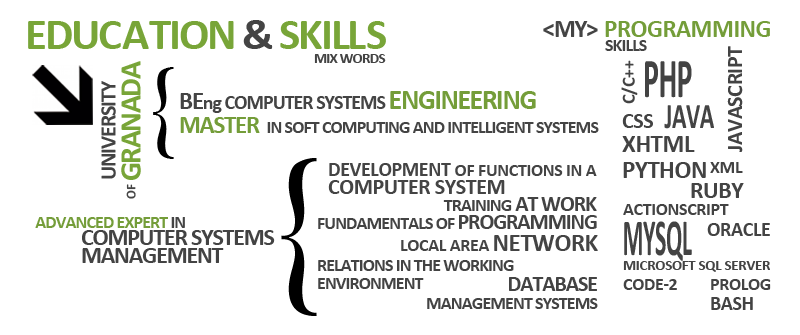
<style>
.page{position:relative;width:800px;height:335px;background:#ffffff}
.page>*{position:absolute;margin:0}
.t1{font:45px "Calibri-Bold";letter-spacing:-0.05em;color:#78a638}
.t2{font:45px "Calibri-Bold";color:#78a638}
.t3{font:45px "Calibri-Bold";letter-spacing:-0.05em;color:#444444}
.t4{font:25px "Calibri-Bold";letter-spacing:-0.02em;color:#749e39}
.t5{font:25px "Calibri-Bold";letter-spacing:-0.05em;color:#444444}
.t6{font:18px "Calibri-Bold";letter-spacing:-0.05em;color:#444444}
.t7{font:15px "Calibri-Bold";letter-spacing:-0.05em;color:#444444}
.t8{font:22px "Calibri-Bold";letter-spacing:-0.02em;color:#444444}
.t9{font:30px "Calibri-Bold";letter-spacing:-0.05em;color:#78a638}
.t10{font:18px "Calibri-Bold";color:#444444}
.t11{font:56.6px "Calibri-Bold";letter-spacing:-0.02em;color:#444444;scale:0.53 1}
.t12{font:100px "Elephant-Regular";letter-spacing:-0.02em;color:#000000;scale:0.61 1}
.t13{font:22px "Calibri-Bold";letter-spacing:-0.05em;color:#444444}
.t14{font:20px "Calibri-Bold";letter-spacing:-0.05em;color:#444444}
.t15{font:20px/24px "Calibri-Bold";letter-spacing:-0.05em;color:#444444}
.t16{font:28px/24px "Calibri-Bold";letter-spacing:-0.05em;color:#749e39}
.t17{font:25px/24px "Calibri-Bold";letter-spacing:-0.05em;color:#749e39}
.t18{font:18px/24px "Calibri-Bold";letter-spacing:-0.05em;color:#444444}
.t19{font:36.1px "Calibri-Bold";letter-spacing:-0.02em;color:#444444;scale:0.66 1}
.t20{font:25px "Calibri-Bold";letter-spacing:-0.02em;color:#444444}
.t21{font:170px "Elephant-Regular";letter-spacing:-0.02em;color:#000000;scale:0.61 1}
.t22{font:18px/18px "Calibri-Bold";letter-spacing:-0.02em;color:#444444}
.t23{font:20px/18px "Calibri-Bold";letter-spacing:-0.02em;color:#444444}
.t24{font:22px/18px "Calibri-Bold";letter-spacing:-0.02em;color:#444444}
.t25{font:18px "Calibri-Bold";letter-spacing:-0.02em;color:#444444}
.t26{font:13px "Calibri-Bold";letter-spacing:-0.05em;color:#444444}
.t27{font:24px "Calibri-Bold";letter-spacing:-0.02em;color:#444444}
.t28{font:18px "Calibri-Bold";letter-spacing:-0.05em;color:#749e39}
.t29{font:52.3px "Calibri-Bold";letter-spacing:-0.02em;color:#444444;scale:0.46 1}
.t30{font:24px/18px "Calibri-Bold";letter-spacing:-0.05em;color:#444444}
.t31{font:18px/18px "Calibri-Bold";letter-spacing:-0.05em;color:#444444}
.t32{font:20px "Calibri-Bold";letter-spacing:-0.02em;color:#444444}
.t33{font:15px "Calibri-Bold";letter-spacing:-0.02em;color:#444444}
.t34{font:22px/18px "Calibri-Bold";letter-spacing:-0.05em;color:#444444}
</style>
<div class="page">
<p class="t1" style="left:28px;top:20px;width:358px;height:29px">EDU<span class="t2">CA</span>TION <span class="t3">&amp;</span> SKIL<span class="t2">LS</span></p>
<p class="t4" style="left:543px;top:21px;width:227px;height:16px"><span class="t5">&lt;MY&gt; </span>PROGRAMMING</p>
<p class="t6" style="left:605px;top:40px;width:42px;height:11px">SKILLS</p>
<p class="t7" style="left:314px;top:54px;width:72px;height:9px">MIX WORDS</p>
<p class="t8" style="left:727px;top:46px;width:16px;height:106px;rotate:-90deg">JAVASCRIPT</p>
<p class="t9" style="left:121px;top:61px;width:20px;height:119px;rotate:-90deg">GRANADA</p>
<p class="t10" style="left:621px;top:60px;width:17px;height:44px;rotate:-90deg">C/C++</p>
<p class="t11" style="left:645px;top:61px;width:47px;height:37px">PHP</p>
<p class="t12" style="left:153px;top:67px;width:21px;height:92px">{</p>
<p class="t13" style="left:101px;top:81px;width:15px;height:98px;rotate:-90deg">UNIVERSITY</p>
<p class="t6" style="left:180px;top:91px;width:419px;height:42px"><span class="t5">BE</span><span class="t14">ng COMPUTER SYS</span><span class="t15">TEMS </span><span class="t16">ENGINEERING<br></span><span class="t17">MASTER  </span><span class="t18">IN SOFT COMPUTING </span>AND INTELLIGENT SYSTEMS</p>
<p class="t19" style="left:664px;top:105px;width:50px;height:24px">JAVA</p>
<p class="t8" style="left:622px;top:114px;width:31px;height:14px">CSS</p>
<p class="t20" style="left:622px;top:136px;width:73px;height:16px">XHTML</p>
<p class="t21" style="left:281px;top:158px;width:36px;height:158px">{</p>
<p class="t22" style="left:328px;top:163px;width:269px;height:31px"><span class="t23">DEVELOPMENT </span>OF FUNCTIONS IN A <br><span class="t24">COMPUTER SYSTEM</span></p>
<p class="t20" style="left:623px;top:162px;width:83px;height:16px">PYTHON</p>
<p class="t25" style="left:710px;top:162px;width:33px;height:11px">XML</p>
<p class="t26" style="left:126px;top:184px;width:10px;height:15px;rotate:-90deg">OF</p>
<p class="t27" style="left:691px;top:183px;width:53px;height:15px">RUBY</p>
<p class="t6" style="left:443px;top:197px;width:154px;height:14px">TRAINING <span class="t13">AT WORK</span></p>
<p class="t25" style="left:623px;top:204px;width:106px;height:11px">ACTIONSCRIPT</p>
<p class="t28" style="left:35px;top:217px;width:150px;height:11px">ADVANCED EXPERT<span class="t6"> IN</span></p>
<p class="t6" style="left:318px;top:215px;width:279px;height:14px">FUNDAMENTALS OF <span class="t13">PROGRAMMING</span></p>
<p class="t29" style="left:624px;top:221px;width:68px;height:40px">MYSQL</p>
<p class="t30" style="left:82px;top:230px;width:193px;height:33px"><span class="t31"><br></span>COMPUTER SYSTEMS <br>MANAGEMENT</p>
<p class="t32" style="left:707px;top:223px;width:63px;height:13px">ORACLE</p>
<p class="t25" style="left:401px;top:235px;width:197px;height:16px">LOCAL AREA <span class="t20">NETWORK</span></p>
<p class="t31" style="left:318px;top:260px;width:196px;height:29px">RELATIONS IN THE WORKING <br>ENVIRONMENT</p>
<p class="t33" style="left:623px;top:261px;width:147px;height:11px">MICROSOFT SQL SERVER</p>
<p class="t31" style="left:427px;top:277px;width:171px;height:32px;text-align:right"><span class="t34">DATABASE<br></span>MANAGEMENT SYSTEMS</p>
<p class="t25" style="left:623px;top:279px;width:54px;height:11px">CODE-2</p>
<p class="t25" style="left:711px;top:279px;width:60px;height:11px">PROLOG</p>
<p class="t32" style="left:711px;top:297px;width:42px;height:13px">BASH</p>
</div>
